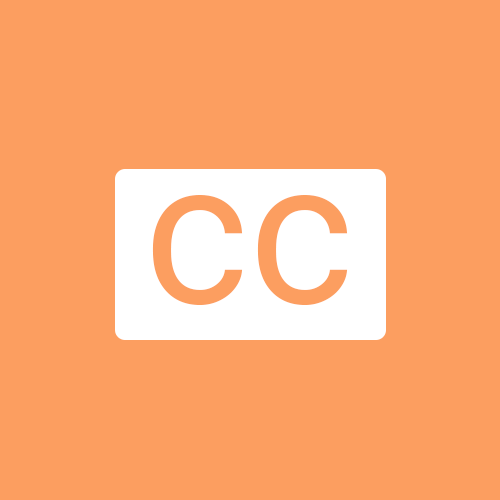
<style>
.page{position:relative;width:500px;height:500px;background:#fc9e60}
.page>*{position:absolute;margin:0}
.t1{font:200px "Roboto-Regular";color:#fc9e60}
</style>
<div class="page">
<p class="t1" style="left:152px;top:195px;width:196px;height:110px">cc</p>
</div>
